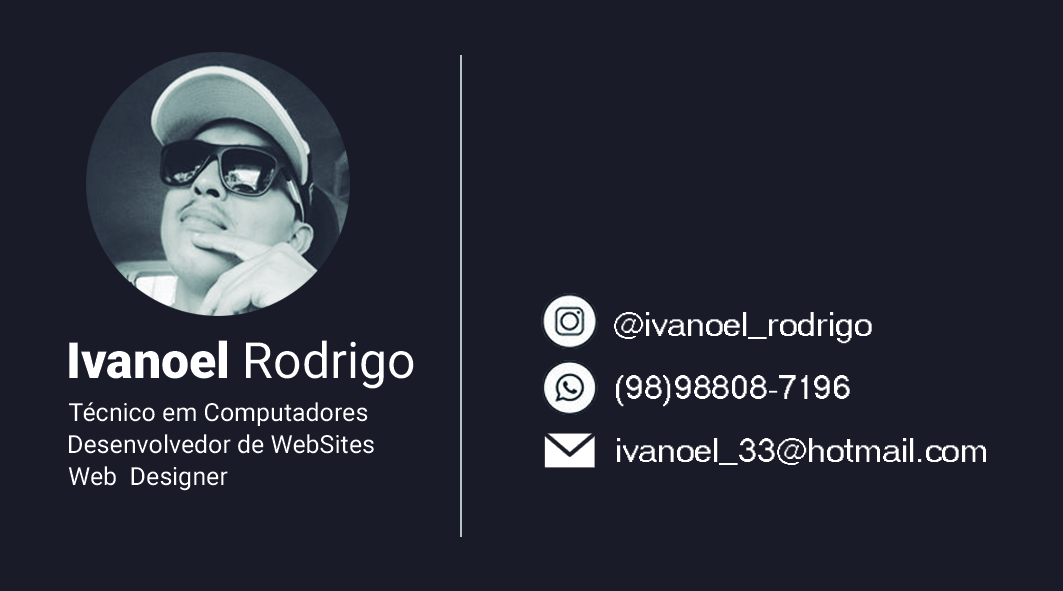
<style>
.page{position:relative;width:1063px;height:591px;background:#191b28}
.page>*{position:absolute;margin:0}
.t1{font:33.3px "MS Sans Serif";color:#ffffff}
.t2{font:50px "Roboto-Black";color:#ffffff}
.t3{font:50px "Roboto-Regular";color:#ffffff}
.t4{font:25px "Roboto-Regular";color:#ffffff}
</style>
<div class="page">
<p class="t1" style="left:614px;top:312px;width:258px;height:32px">@ivanoel_rodrigo</p>
<p class="t2" style="left:69px;top:340px;width:345px;height:49px">Ivanoel<span class="t3"> Rodrigo</span></p>
<p class="t1" style="left:616px;top:375px;width:234px;height:32px">(98)98808-7196</p>
<p class="t4" style="left:69px;top:402px;width:299px;height:24px">Técnico em Computadores</p>
<p class="t4" style="left:69px;top:434px;width:305px;height:20px">Desenvolvedor de WebSites</p>
<p class="t1" style="left:617px;top:438px;width:369px;height:27px">ivanoel_33@hotmail.com</p>
<p class="t4" style="left:68px;top:466px;width:160px;height:25px">Web  Designer</p>
</div>
